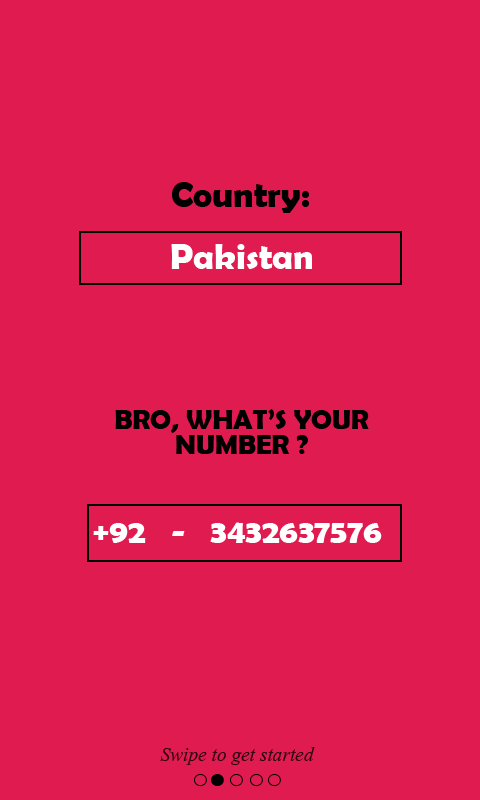
<style>
.page{position:relative;width:480px;height:800px;background:#e01b50}
.page>*{position:absolute;margin:0}
.t1{font:36px "BerlinSansFBDemi-Bold";color:#000000}
.t2{font:36px "BerlinSansFBDemi-Bold";color:#ffffff}
.t3{font:28px/25px "BerlinSansFBDemi-Bold";color:#000000}
.t4{font:33.6px "BerlinSansFBDemi-Bold";color:#ffffff}
.t5{font:24px "Vijaya";color:#2d0510}
</style>
<div class="page">
<p class="t1" style="left:172px;top:182px;width:137px;height:31px">Country:</p>
<p class="t2" style="left:171px;top:244px;width:141px;height:25px">Pakistan</p>
<p class="t3" style="left:115px;top:409px;width:254px;height:45px;text-align:center">BRO, WHAT’S YOUR<br>NUMBER ?</p>
<p class="t4" style="left:93px;top:522px;width:289px;height:21px">+92   -   3432637576</p>
<p class="t5" style="left:160px;top:747px;width:155px;height:18px">Swipe to get started</p>
</div>
